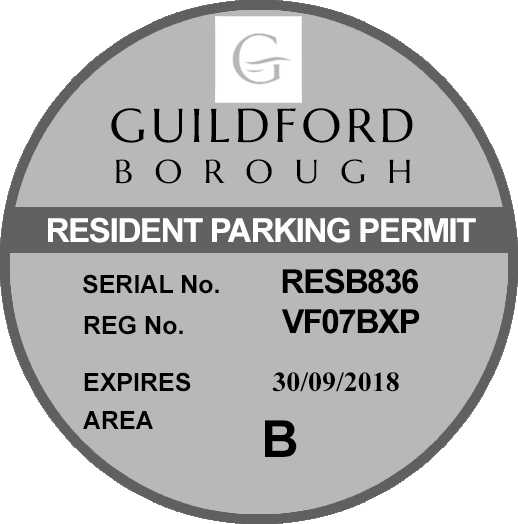
<style>
.page{position:relative;width:518px;height:524px;background:#b8b8b8}
.page>*{position:absolute;margin:0}
.t1{font:47.6px "Marcellus-Regular";letter-spacing:0.08em;color:#000000;scale:1.05 1}
.t2{font:33.3px "Marcellus-Regular";letter-spacing:0.6em;color:#000000;scale:1.05 1}
.t3{font:33.3px "Arial-BoldMT";letter-spacing:-0.05em;color:#ffffff}
.t4{font:33.3px "Arial-BoldMT";letter-spacing:-0.05em;color:#000000}
.t5{font:25px "Arial-BoldMT";color:#000000}
.t6{font:28px "TimesNewRomanPS-BoldMT";color:#000000}
.t7{font:51.2px "Arial-BoldMT";letter-spacing:-0.05em;color:#000000}
</style>
<div class="page">
<p class="t1" style="left:111px;top:108px;width:302px;height:35px">GUILDFORD</p>
<p class="t2" style="left:116px;top:159px;width:294px;height:25px">BOROUGH</p>
<p class="t3" style="left:48px;top:217px;width:428px;height:26px">RESIDENT PARKING PERMIT</p>
<p class="t4" style="left:282px;top:268px;width:136px;height:26px">RESB836</p>
<p class="t5" style="left:83px;top:274px;width:136px;height:20px">SERIAL No.</p>
<p class="t5" style="left:84px;top:315px;width:99px;height:20px">REG No.</p>
<p class="t4" style="left:281px;top:309px;width:139px;height:25px">VF07BXP</p>
<p class="t5" style="left:84px;top:372px;width:107px;height:20px">EXPIRES</p>
<p class="t6" style="left:272px;top:372px;width:127px;height:20px">30/09/2018</p>
<p class="t5" style="left:83px;top:411px;width:70px;height:18px">AREA</p>
<p class="t7" style="left:265px;top:420px;width:32px;height:37px">B</p>
</div>
